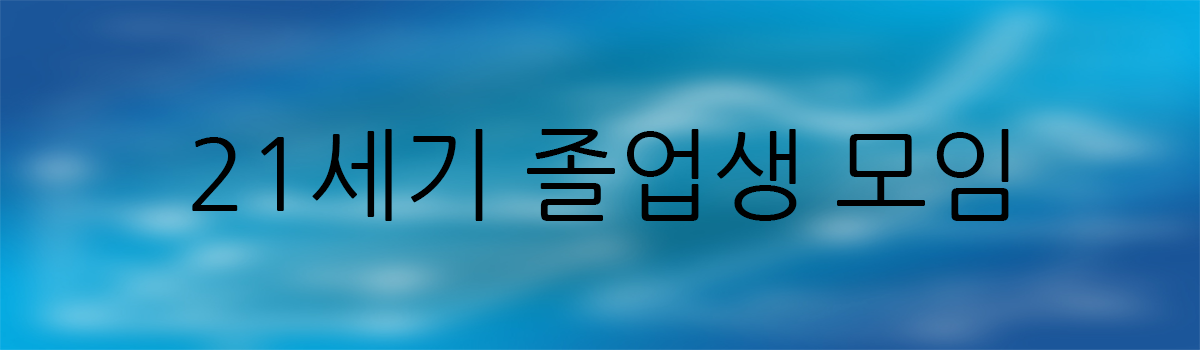
<style>
.page{position:relative;width:1200px;height:350px}
.page>*{position:absolute;margin:0}
.t1{font:100px "NanumGothic";color:#000000}
</style>
<div class="page">
<p class="t1" style="left:192px;top:129px;width:817px;height:92px">21세기 졸업생 모임</p>
</div>
